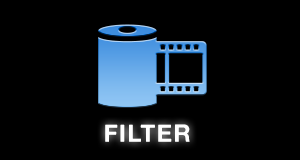
<style>
.page{position:relative;width:300px;height:160px;background:#000000}
.page>*{position:absolute;margin:0}
.t1{font:24px "AlteHaasGrotesk_Bold";letter-spacing:0.05em;color:#ffffff}
</style>
<div class="page">
<p class="t1" style="left:105px;top:124px;width:85px;height:18px">FILTER</p>
</div>
